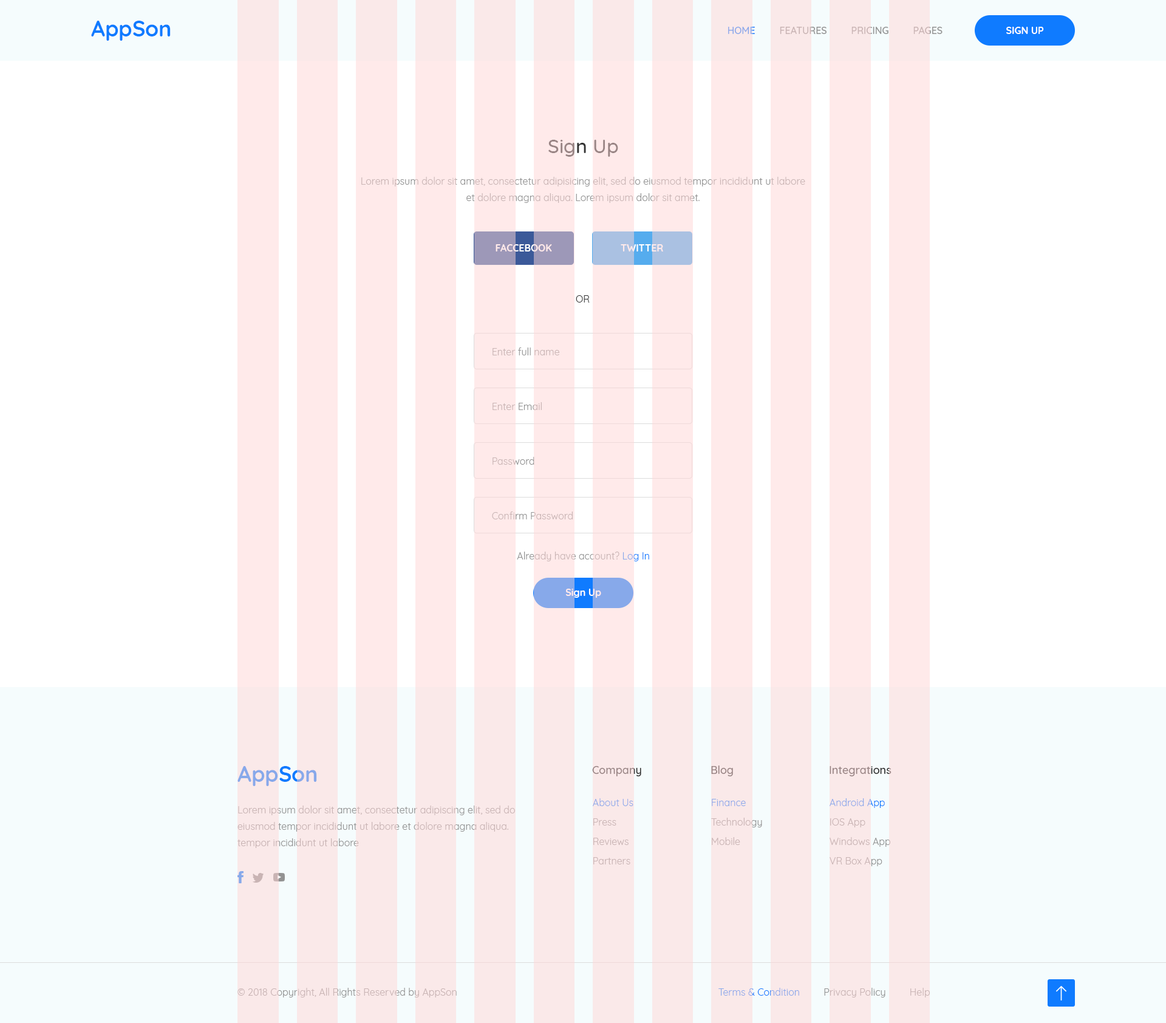
<style>
.page{position:relative;width:1166px;height:1023px;background:#ffffff}
.page>*{position:absolute;margin:0}
.t1{font:21.9px "Quicksand-Bold";color:#0f7bff}
.t2{font:9.7px "Quicksand-Medium";text-transform:uppercase}
.t3{font:9.7px "Quicksand-Bold";color:#ffffff}
.t4{font:19.4px "Quicksand-Medium";color:#998585}
.t5{font:9.7px/16.4px "Quicksand-Regular"}
.t6{font:9.7px "Quicksand-Bold";color:#ffffff;text-transform:uppercase}
.t7{font:9.7px "Quicksand-Regular";color:#333333}
.t8{font:9.7px "Quicksand-Regular";color:#c9b4b4}
.t9{font:9.7px "Quicksand-Regular"}
.t10{font:21.9px "Quicksand-Bold";color:#87a9ea}
.t11{font:10.9px "Quicksand-Medium";color:#998585}
.t12{font:9.7px "Quicksand-Regular";color:#87a9ea}
</style>
<div class="page">
<p class="t1" style="left:91px;top:21px;width:80px;height:20px">AppSon</p>
<p class="t2" style="left:728px;top:27px;width:215px;height:7px">Home         Features         Pricing         Pages</p>
<p class="t3" style="left:1006px;top:27px;width:38px;height:7px">SIGN UP</p>
<p class="t4" style="left:548px;top:140px;width:70px;height:17px">Sign Up</p>
<p class="t5" style="left:361px;top:177px;width:444px;height:26px;text-align:center">Lorem ipsum dolor sit amet, consectetur adipisicing elit, sed do eiusmod tempor incididunt ut labore et dolore magna aliqua. Lorem ipsum dolor sit amet.</p>
<p class="t6" style="left:496px;top:244px;width:56px;height:7px">FACCEBOOK</p>
<p class="t6" style="left:621px;top:244px;width:42px;height:7px">TWItter</p>
<p class="t7" style="left:576px;top:295px;width:14px;height:7px">OR</p>
<p class="t8" style="left:493px;top:347px;width:66px;height:8px">Enter full name</p>
<p class="t9" style="left:493px;top:402px;width:49px;height:8px">Enter Email</p>
<p class="t9" style="left:493px;top:457px;width:41px;height:8px">Password</p>
<p class="t8" style="left:492px;top:511px;width:81px;height:8px">Confirm Password</p>
<p class="t9" style="left:517px;top:551px;width:132px;height:10px">Already have account? Log In</p>
<p class="t3" style="left:565px;top:588px;width:36px;height:10px">Sign Up</p>
<p class="t10" style="left:237px;top:766px;width:80px;height:20px">AppSon</p>
<p class="t11" style="left:592px;top:766px;width:49px;height:10px">Company</p>
<p class="t11" style="left:711px;top:765px;width:22px;height:11px">Blog</p>
<p class="t11" style="left:830px;top:766px;width:61px;height:10px">Integrations</p>
<p class="t12" style="left:593px;top:798px;width:40px;height:8px">About Us</p>
<p class="t9" style="left:830px;top:798px;width:55px;height:10px">Android App</p>
<p class="t5" style="left:237px;top:805px;width:278px;height:43px">Lorem ipsum dolor sit amet, consectetur adipiscing elit, sed do eiusmod tempor incididunt ut labore et dolore magna aliqua. tempor incididunt ut labore</p>
<p class="t12" style="left:712px;top:799px;width:34px;height:7px">Finance</p>
<p class="t8" style="left:593px;top:818px;width:23px;height:7px">Press</p>
<p class="t8" style="left:711px;top:817px;width:51px;height:10px">Technology</p>
<p class="t8" style="left:830px;top:818px;width:35px;height:9px">IOS App</p>
<p class="t8" style="left:593px;top:837px;width:36px;height:8px">Reviews</p>
<p class="t8" style="left:712px;top:837px;width:28px;height:8px">Mobile</p>
<p class="t9" style="left:830px;top:837px;width:60px;height:10px">Windows App</p>
<p class="t8" style="left:593px;top:857px;width:37px;height:7px">Partners</p>
<p class="t8" style="left:830px;top:857px;width:52px;height:9px">VR Box App</p>
<p class="t8" style="left:237px;top:987px;width:220px;height:10px">© 2018 Copyright, All Rights Reserved by AppSon</p>
<p class="t9" style="left:718px;top:987px;width:212px;height:10px">Terms &amp; Condition         Privacy Policy         Help</p>
</div>
